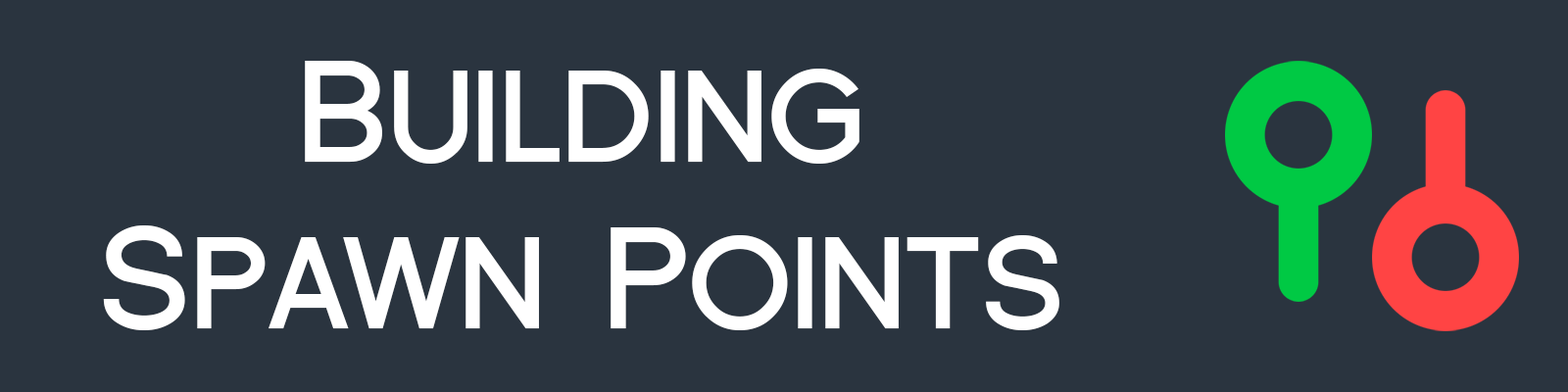
<style>
.page{position:relative;width:1568px;height:392px;background:#2a343f}
.page>*{position:absolute;margin:0}
.t1{font:138.8px "FlorencesansSC-Bold";letter-spacing:-0.02em;color:#ffffff}
</style>
<div class="page">
<p class="t1" style="left:103px;top:61px;width:956px;height:269px;text-align:center">Building<br>Spawn Points</p>
</div>
